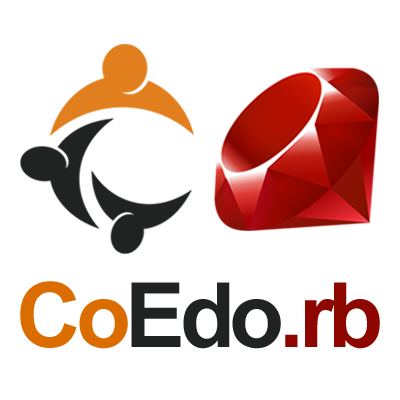
<style>
.page{position:relative;width:400px;height:400px;background:#ffffff}
.page>*{position:absolute;margin:0}
.t1{font:90px "Arial-BoldMT";letter-spacing:-0.06em;color:#212222}
.t2{font:90px "Arial-BoldMT";letter-spacing:-0.06em;color:#da6c00}
.t3{font:90px "Arial-BoldMT";letter-spacing:-0.06em;color:#8e0600}
</style>
<div class="page">
<p class="t1" style="left:20px;top:281px;width:360px;height:68px"><span class="t2">Co</span>Edo<span class="t3">.rb</span></p>
</div>
